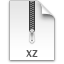
<style>
.page{position:relative;width:64px;height:64px;background:#ffffff}
.page>*{position:absolute;margin:0}
.t1{font:9.1px "LucidaSans-Demi";letter-spacing:-0.013em;color:#575757}
</style>
<div class="page">
<p class="t1" style="left:26px;top:50px;width:12px;height:7px">XZ</p>
</div>
